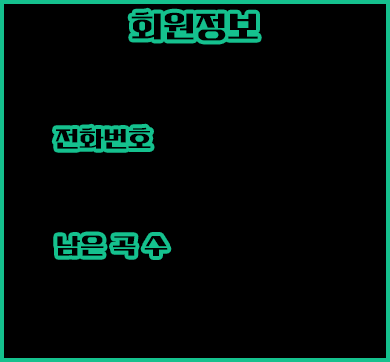
<style>
.page{position:relative;width:390px;height:362px;background:#000000}
.page>*{position:absolute;margin:0}
.t1{font:33.3px "KoreanPST-M";color:#000000}
.t2{font:25px "KoreanPST-M";color:#000000}
</style>
<div class="page">
<p class="t1" style="left:131px;top:11px;width:127px;height:30px">회원정보</p>
<p class="t2" style="left:55px;top:127px;width:96px;height:22px">전화번호</p>
<p class="t2" style="left:57px;top:235px;width:111px;height:21px">남은 곡 수</p>
</div>
